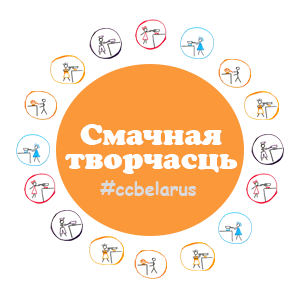
<style>
.page{position:relative;width:300px;height:300px;background:#ffffff}
.page>*{position:absolute;margin:0}
.t1{font:30px/24px "AGCooperCyrRoman";color:#ffffff}
.t2{font:30px/30px "AGCooperCyrRoman";color:#ffffff}
.t3{font:18px "ComicSansMS-Bold";color:#dadada}
</style>
<div class="page">
<p class="t1" style="left:65px;top:124px;width:173px;height:50px;text-align:center"><span class="t2"><br><br></span>Смачная<br>творчасць</p>
<p class="t3" style="left:100px;top:180px;width:96px;height:16px">#ccbelarus</p>
</div>
